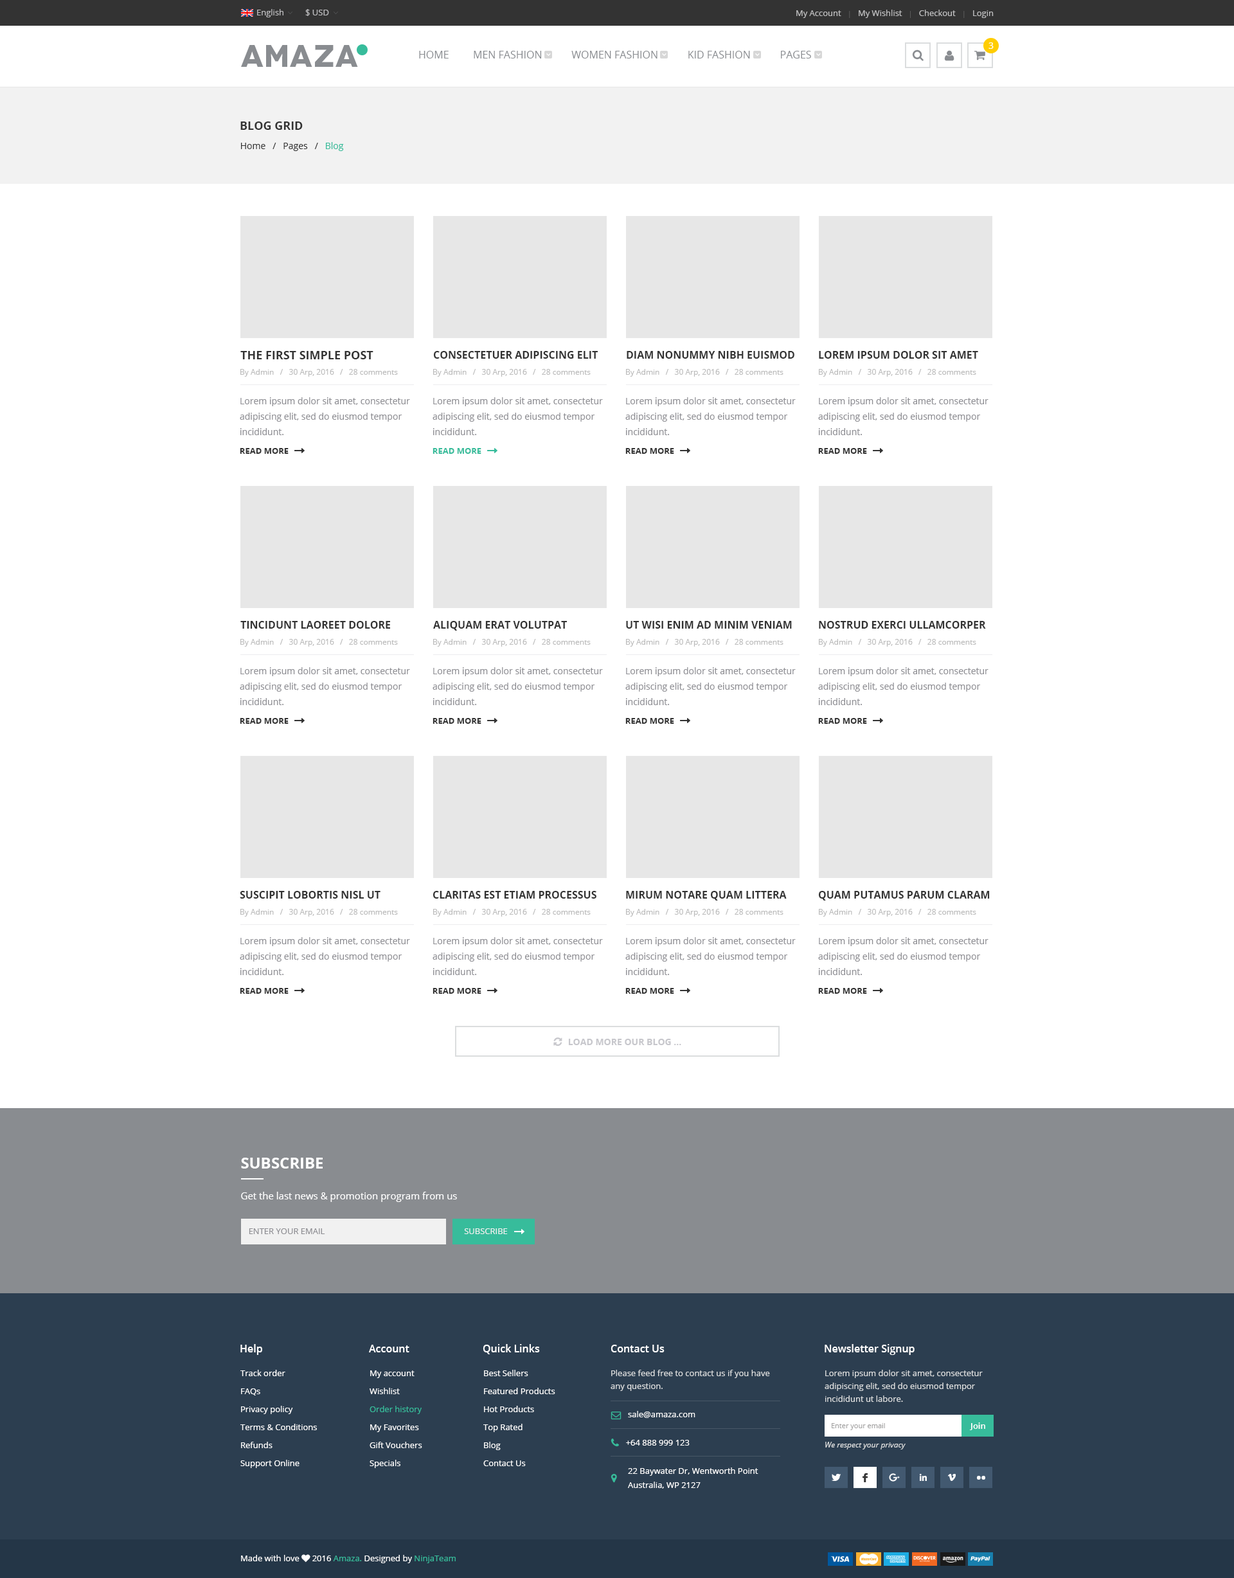
<style>
.page{position:relative;width:1234px;height:1578px;background:#ffffff}
.page>*{position:absolute;margin:0}
.t1{font:8.4px "OpenSans";color:#bdbdbf}
.t2{font:8.4px "OpenSans";color:#bebebf}
.t3{font:7.1px "OpenSans";color:#595959}
.t4{font:30.9px "Novecentowide-Bold";letter-spacing:0.025em;color:#898c90;text-transform:uppercase}
.t5{font:10.3px "OpenSans";color:#898c90;text-transform:uppercase}
.t6{font:9px "OpenSans";letter-spacing:0.025em;color:#ffffff;text-transform:uppercase}
.t7{font:11.6px "OpenSans-Bold";color:#333333;text-transform:uppercase}
.t8{font:9px "OpenSans";color:#333333}
.t9{font:9px "OpenSans";color:#37bc9b}
.t10{font:10.3px "OpenSans-Bold";color:#333333;text-transform:uppercase}
.t11{font:7.7px "OpenSans";color:#bbbbbb}
.t12{font:9px/15.4px "OpenSans";color:#8e8e93}
.t13{font:8.4px "OpenSans-Bold";color:#333333;text-transform:uppercase}
.t14{font:8.4px "OpenSans-Bold";color:#37bc9b;text-transform:uppercase}
.t15{font:9px "OpenSans-Bold";color:#c7c7cc;text-transform:uppercase}
.t16{font:15.4px "OpenSans-Bold";color:#ffffff;text-transform:uppercase}
.t17{font:9.6px "OpenSans";color:#ffffff}
.t18{font:8.4px "OpenSans";color:#8e8e93;text-transform:uppercase}
.t19{font:8.4px "OpenSans";color:#f1f1f1;text-transform:uppercase}
.t20{font:10.3px "OpenSans-Semibold";color:#ffffff}
.t21{font:8.4px/18px "OpenSans";color:#ffffff}
.t22{font:8.4px/18px "OpenSans";color:#37bc9b}
.t23{font:8.4px/14.1px "OpenSans";color:#ffffff}
.t24{font:8.4px/12.9px "OpenSans";color:#dbddde}
.t25{font:7.1px "OpenSans";color:#a3a2a2}
.t26{font:8.4px "OpenSans-Semibold";color:#ffffff}
</style>
<div class="page">
<p class="t1" style="left:257px;top:9px;width:27px;height:8px">English</p>
<p class="t1" style="left:305px;top:9px;width:24px;height:7px">$ USD</p>
<p class="t2" style="left:797px;top:10px;width:197px;height:8px">My Account   <span class="t3">|</span>   My Wishlist   <span class="t3">|</span>   Checkout   <span class="t3">| </span>  Login</p>
<p class="t4" style="left:241px;top:45px;width:117px;height:22px">AMAZA</p>
<p class="t5" style="left:419px;top:51px;width:392px;height:8px">Home         Men Fashion           Women Fashion           Kid Fashion           Pages</p>
<p class="t6" style="left:989px;top:42px;width:5px;height:7px">3</p>
<p class="t7" style="left:240px;top:122px;width:63px;height:8px">Blog Grid</p>
<p class="t8" style="left:241px;top:142px;width:103px;height:9px">Home   /   Pages   /   <span class="t9">Blog</span></p>
<p class="t7" style="left:240px;top:351px;width:134px;height:8px">The First Simple post</p>
<p class="t10" style="left:434px;top:351px;width:164px;height:8px">consectetuer adipiscing elit</p>
<p class="t10" style="left:627px;top:351px;width:168px;height:8px">diam nonummy nibh euismod</p>
<p class="t10" style="left:819px;top:351px;width:159px;height:8px">Lorem ipsum dolor sit amet</p>
<p class="t11" style="left:240px;top:369px;width:158px;height:8px">By Admin   /   30 Arp, 2016   /   28 comments</p>
<p class="t11" style="left:433px;top:369px;width:158px;height:8px">By Admin   /   30 Arp, 2016   /   28 comments</p>
<p class="t11" style="left:626px;top:369px;width:158px;height:8px">By Admin   /   30 Arp, 2016   /   28 comments</p>
<p class="t11" style="left:819px;top:369px;width:158px;height:8px">By Admin   /   30 Arp, 2016   /   28 comments</p>
<p class="t12" style="left:240px;top:397px;width:170px;height:38px">Lorem ipsum dolor sit amet, consectetur adipiscing elit, sed do eiusmod tempor incididunt.</p>
<p class="t12" style="left:433px;top:397px;width:170px;height:38px">Lorem ipsum dolor sit amet, consectetur adipiscing elit, sed do eiusmod tempor incididunt.</p>
<p class="t12" style="left:626px;top:397px;width:170px;height:38px">Lorem ipsum dolor sit amet, consectetur adipiscing elit, sed do eiusmod tempor incididunt.</p>
<p class="t12" style="left:818px;top:397px;width:171px;height:38px">Lorem ipsum dolor sit amet, consectetur adipiscing elit, sed do eiusmod tempor incididunt.</p>
<p class="t13" style="left:240px;top:448px;width:49px;height:6px">Read more</p>
<p class="t14" style="left:433px;top:448px;width:49px;height:6px">Read more</p>
<p class="t13" style="left:626px;top:448px;width:48px;height:6px">Read more</p>
<p class="t13" style="left:818px;top:448px;width:49px;height:6px">Read more</p>
<p class="t10" style="left:240px;top:621px;width:150px;height:8px">tincidunt laoreet dolore</p>
<p class="t10" style="left:433px;top:621px;width:134px;height:10px">Aliquam erat volutpat</p>
<p class="t10" style="left:626px;top:621px;width:166px;height:8px">Ut wisi enim ad minim veniam</p>
<p class="t10" style="left:819px;top:621px;width:167px;height:8px">nostrud exerci ullamcorper</p>
<p class="t11" style="left:240px;top:639px;width:158px;height:8px">By Admin   /   30 Arp, 2016   /   28 comments</p>
<p class="t11" style="left:433px;top:639px;width:158px;height:8px">By Admin   /   30 Arp, 2016   /   28 comments</p>
<p class="t11" style="left:626px;top:639px;width:158px;height:8px">By Admin   /   30 Arp, 2016   /   28 comments</p>
<p class="t11" style="left:819px;top:639px;width:158px;height:8px">By Admin   /   30 Arp, 2016   /   28 comments</p>
<p class="t12" style="left:240px;top:667px;width:170px;height:38px">Lorem ipsum dolor sit amet, consectetur adipiscing elit, sed do eiusmod tempor incididunt.</p>
<p class="t12" style="left:433px;top:667px;width:170px;height:38px">Lorem ipsum dolor sit amet, consectetur adipiscing elit, sed do eiusmod tempor incididunt.</p>
<p class="t12" style="left:626px;top:667px;width:170px;height:38px">Lorem ipsum dolor sit amet, consectetur adipiscing elit, sed do eiusmod tempor incididunt.</p>
<p class="t12" style="left:818px;top:667px;width:171px;height:38px">Lorem ipsum dolor sit amet, consectetur adipiscing elit, sed do eiusmod tempor incididunt.</p>
<p class="t13" style="left:240px;top:718px;width:49px;height:6px">Read more</p>
<p class="t13" style="left:433px;top:718px;width:49px;height:6px">Read more</p>
<p class="t13" style="left:626px;top:718px;width:48px;height:6px">Read more</p>
<p class="t13" style="left:818px;top:718px;width:49px;height:6px">Read more</p>
<p class="t10" style="left:240px;top:891px;width:141px;height:8px">suscipit lobortis nisl ut</p>
<p class="t10" style="left:433px;top:891px;width:164px;height:8px">Claritas est etiam processus</p>
<p class="t10" style="left:626px;top:891px;width:161px;height:10px">Mirum notare quam littera</p>
<p class="t10" style="left:819px;top:891px;width:171px;height:10px">quam putamus parum claram</p>
<p class="t11" style="left:240px;top:909px;width:158px;height:8px">By Admin   /   30 Arp, 2016   /   28 comments</p>
<p class="t11" style="left:433px;top:909px;width:158px;height:8px">By Admin   /   30 Arp, 2016   /   28 comments</p>
<p class="t11" style="left:626px;top:909px;width:158px;height:8px">By Admin   /   30 Arp, 2016   /   28 comments</p>
<p class="t11" style="left:819px;top:909px;width:158px;height:8px">By Admin   /   30 Arp, 2016   /   28 comments</p>
<p class="t12" style="left:240px;top:937px;width:170px;height:38px">Lorem ipsum dolor sit amet, consectetur adipiscing elit, sed do eiusmod tempor incididunt.</p>
<p class="t12" style="left:433px;top:937px;width:170px;height:38px">Lorem ipsum dolor sit amet, consectetur adipiscing elit, sed do eiusmod tempor incididunt.</p>
<p class="t12" style="left:626px;top:937px;width:170px;height:38px">Lorem ipsum dolor sit amet, consectetur adipiscing elit, sed do eiusmod tempor incididunt.</p>
<p class="t12" style="left:818px;top:937px;width:171px;height:38px">Lorem ipsum dolor sit amet, consectetur adipiscing elit, sed do eiusmod tempor incididunt.</p>
<p class="t13" style="left:240px;top:988px;width:49px;height:6px">Read more</p>
<p class="t13" style="left:433px;top:988px;width:49px;height:6px">Read more</p>
<p class="t13" style="left:626px;top:988px;width:48px;height:6px">Read more</p>
<p class="t13" style="left:818px;top:988px;width:49px;height:6px">Read more</p>
<p class="t15" style="left:568px;top:1039px;width:113px;height:6px">Load more Our Blog ...</p>
<p class="t16" style="left:241px;top:1158px;width:82px;height:11px">Subscribe</p>
<p class="t17" style="left:241px;top:1192px;width:216px;height:10px">Get the last news &amp; promotion program from us</p>
<p class="t18" style="left:249px;top:1228px;width:76px;height:6px">Enter your email</p>
<p class="t19" style="left:464px;top:1228px;width:44px;height:6px">Subscribe</p>
<p class="t20" style="left:240px;top:1344px;width:22px;height:11px">Help</p>
<p class="t20" style="left:369px;top:1345px;width:41px;height:8px">Account</p>
<p class="t20" style="left:483px;top:1344px;width:57px;height:10px">Quick Links</p>
<p class="t20" style="left:611px;top:1345px;width:54px;height:8px">Contact Us</p>
<p class="t20" style="left:825px;top:1344px;width:90px;height:11px">Newsletter Signup</p>
<p class="t21" style="left:240px;top:1370px;width:77px;height:98px">Track order<br>FAQs<br>Privacy policy<br>Terms &amp; Conditions<br>Refunds<br>Support Online</p>
<p class="t21" style="left:370px;top:1371px;width:52px;height:97px">My account<br>Wishlist<br><span class="t22">Order history<br></span>My Favorites<br>Gift Vouchers<br>Specials</p>
<p class="t21" style="left:483px;top:1370px;width:72px;height:96px">Best Sellers<br>Featured Products<br>Hot Products<br>Top Rated<br>Blog<br>Contact Us</p>
<p class="t23" style="left:611px;top:1370px;width:159px;height:119px"><span class="t24">Please feed free to contact us if you have any question.<br></span><br>        sale@amaza.com<br><br>       +64 888 999 123<br><br>        22 Baywater Dr, Wentworth Point<br>        Australia, WP 2127</p>
<p class="t25" style="left:832px;top:1423px;width:53px;height:7px">Enter your email</p>
<p class="t26" style="left:969px;top:1423px;width:17px;height:7px">Join</p>
</div>
